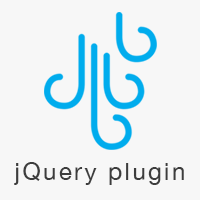
<style>
.page{position:relative;width:200px;height:200px;background:#f7f7f7}
.page>*{position:absolute;margin:0}
.t1{font:24px "HelveticaNeue";letter-spacing:0.1em;color:#3d3d3d}
</style>
<div class="page">
<p class="t1" style="left:14px;top:162px;width:170px;height:23px">jQuery plugin</p>
</div>
